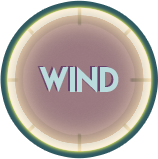
<style>
.page{position:relative;width:158px;height:159px;background:#ffffff}
.page>*{position:absolute;margin:0}
.t1{font:31.3px "LemonMilk";color:#badbdc}
</style>
<div class="page">
<p class="t1" style="left:39px;top:66px;width:80px;height:27px">Wind</p>
</div>
